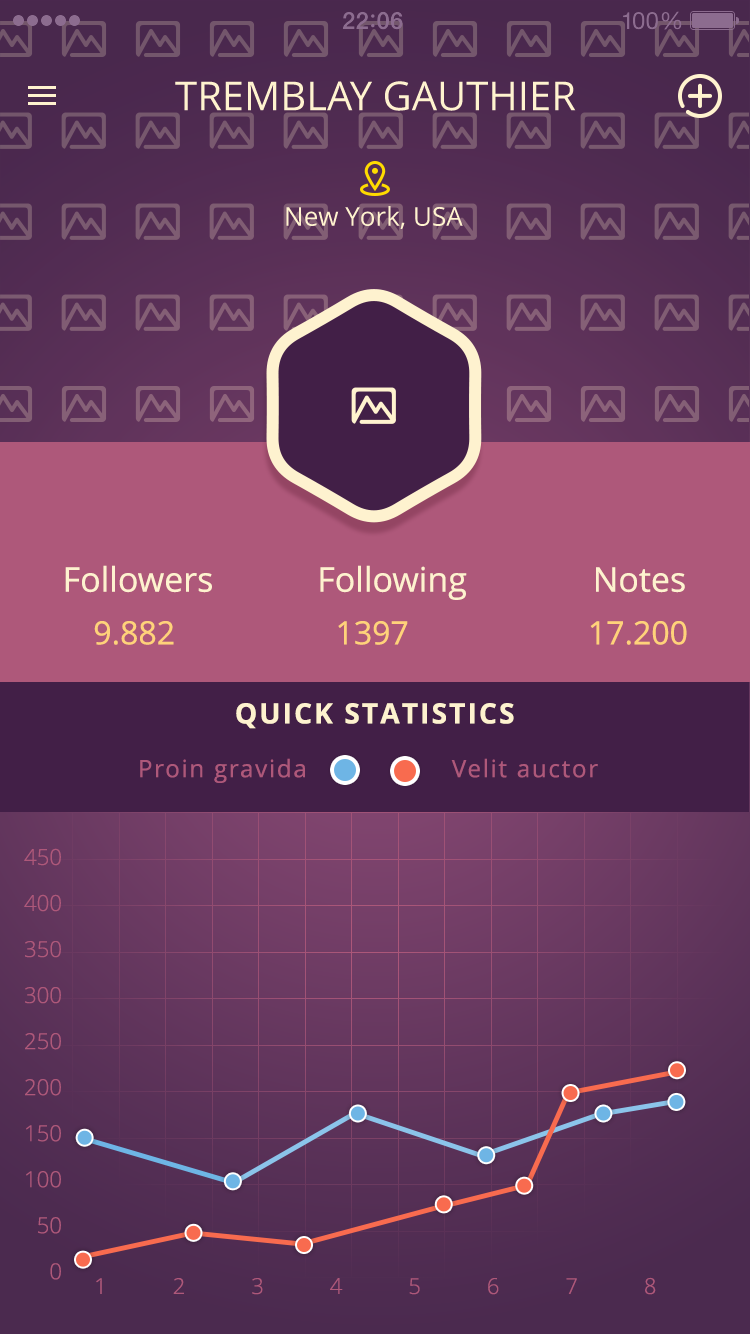
<style>
.page{position:relative;width:750px;height:1334px}
.page>*{position:absolute;margin:0}
.t1{font:40px "OpenSans";color:#fff3cf;text-transform:uppercase}
.t2{font:26px "OpenSans";color:#fff3cf}
.t3{font:34px "OpenSans";color:#fef2cf}
.t4{font:32px "OpenSans";color:#ffd27a}
.t5{font:28px "OpenSans-Bold";letter-spacing:0.075em;color:#fef2cf;text-transform:uppercase}
.t6{font:24px "OpenSans";letter-spacing:0.075em;color:#ae587a}
.t7{font:22px/46px "OpenSans-Light";color:#ae587a}
.t8{font:22px "OpenSans-Light";letter-spacing:3em;color:#ae587a}
</style>
<div class="page">
<p class="t1" style="left:175px;top:81px;width:401px;height:30px">Tremblay Gauthier</p>
<p class="t2" style="left:286px;top:206px;width:177px;height:23px">New York, USA</p>
<p class="t3" style="left:65px;top:565px;width:620px;height:35px">Followers            Following            Notes</p>
<p class="t4" style="left:94px;top:621px;width:80px;height:24px">9.882</p>
<p class="t4" style="left:338px;top:621px;width:70px;height:24px">1397</p>
<p class="t4" style="left:590px;top:621px;width:97px;height:24px">17.200</p>
<p class="t5" style="left:236px;top:703px;width:278px;height:26px">Quick statistics</p>
<p class="t6" style="left:140px;top:758px;width:165px;height:25px">Proin gravida</p>
<p class="t6" style="left:451px;top:758px;width:147px;height:20px">Velit auctor</p>
<p class="t7" style="left:24px;top:848px;width:37px;height:432px;text-align:right">450<br>400<br>350<br>300<br>250<br>200<br>150<br>100<br>50<br>0</p>
<p class="t8" style="left:96px;top:1277px;width:560px;height:18px">12345678</p>
</div>
